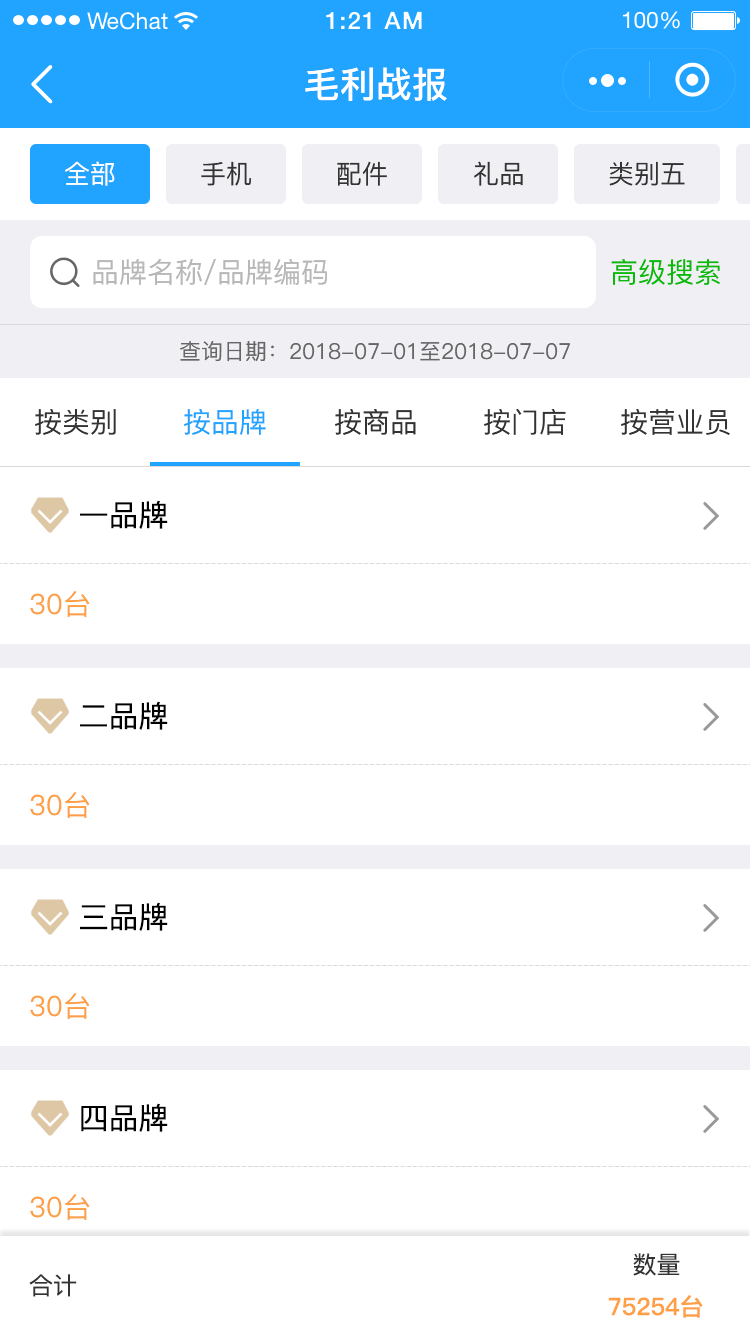
<style>
.page{position:relative;width:750px;height:1334px;background:#ffffff}
.page>*{position:absolute;margin:0}
.t1{font:36px "PingFang-SC-Bold";color:#ffffff}
.t2{font:26px "PingFang-SC-Medium";color:#ffffff}
.t3{font:26px "PingFang-SC-Medium";color:#333333}
.t4{font:28px "PingFang-SC-Medium";color:#b8b8b8}
.t5{font:28px "PingFang-SC-Medium";color:#09bb07}
.t6{font:22px "PingFang-SC-Medium";color:#666666}
.t7{font:28px "PingFang-SC-Medium";color:#333333}
.t8{font:28px "PingFang-SC-Medium";color:#21a4ff}
.t9{font:30px "PingFang-SC-Medium";color:#000000}
.t10{font:28px "PingFang-SC-Medium";color:#fe9f45}
.t11{font:24px "PingFang-SC-Medium";color:#333333}
.t12{font:24px "PingFang-SC-Bold";color:#fe9f45}
</style>
<div class="page">
<p class="t1" style="left:305px;top:67px;width:142px;height:34px">毛利战报</p>
<p class="t2" style="left:65px;top:161px;width:50px;height:25px">全部</p>
<p class="t3" style="left:201px;top:161px;width:50px;height:25px">手机</p>
<p class="t3" style="left:337px;top:161px;width:50px;height:25px">配件</p>
<p class="t3" style="left:474px;top:161px;width:49px;height:25px">礼品</p>
<p class="t3" style="left:609px;top:161px;width:76px;height:25px">类别五</p>
<p class="t4" style="left:93px;top:259px;width:234px;height:26px">品牌名称/品牌编码</p>
<p class="t5" style="left:611px;top:259px;width:109px;height:26px">高级搜索</p>
<p class="t6" style="left:180px;top:341px;width:390px;height:21px">查询日期：2018-07-01至2018-07-07</p>
<p class="t7" style="left:35px;top:409px;width:81px;height:26px">按类别</p>
<p class="t8" style="left:184px;top:409px;width:82px;height:26px">按品牌</p>
<p class="t7" style="left:335px;top:409px;width:81px;height:26px">按商品</p>
<p class="t7" style="left:484px;top:409px;width:82px;height:26px">按门店</p>
<p class="t7" style="left:621px;top:409px;width:109px;height:26px">按营业员</p>
<p class="t9" style="left:80px;top:500px;width:88px;height:29px">一品牌</p>
<p class="t10" style="left:30px;top:591px;width:60px;height:26px">30台</p>
<p class="t9" style="left:80px;top:701px;width:88px;height:29px">二品牌</p>
<p class="t10" style="left:30px;top:792px;width:60px;height:26px">30台</p>
<p class="t9" style="left:80px;top:902px;width:88px;height:29px">三品牌</p>
<p class="t10" style="left:30px;top:993px;width:60px;height:26px">30台</p>
<p class="t9" style="left:81px;top:1103px;width:87px;height:29px">四品牌</p>
<p class="t10" style="left:30px;top:1194px;width:60px;height:26px">30台</p>
<p class="t11" style="left:633px;top:1253px;width:47px;height:23px">数量</p>
<p class="t11" style="left:29px;top:1274px;width:48px;height:23px">合计</p>
<p class="t12" style="left:608px;top:1295px;width:95px;height:23px">75254台</p>
</div>
